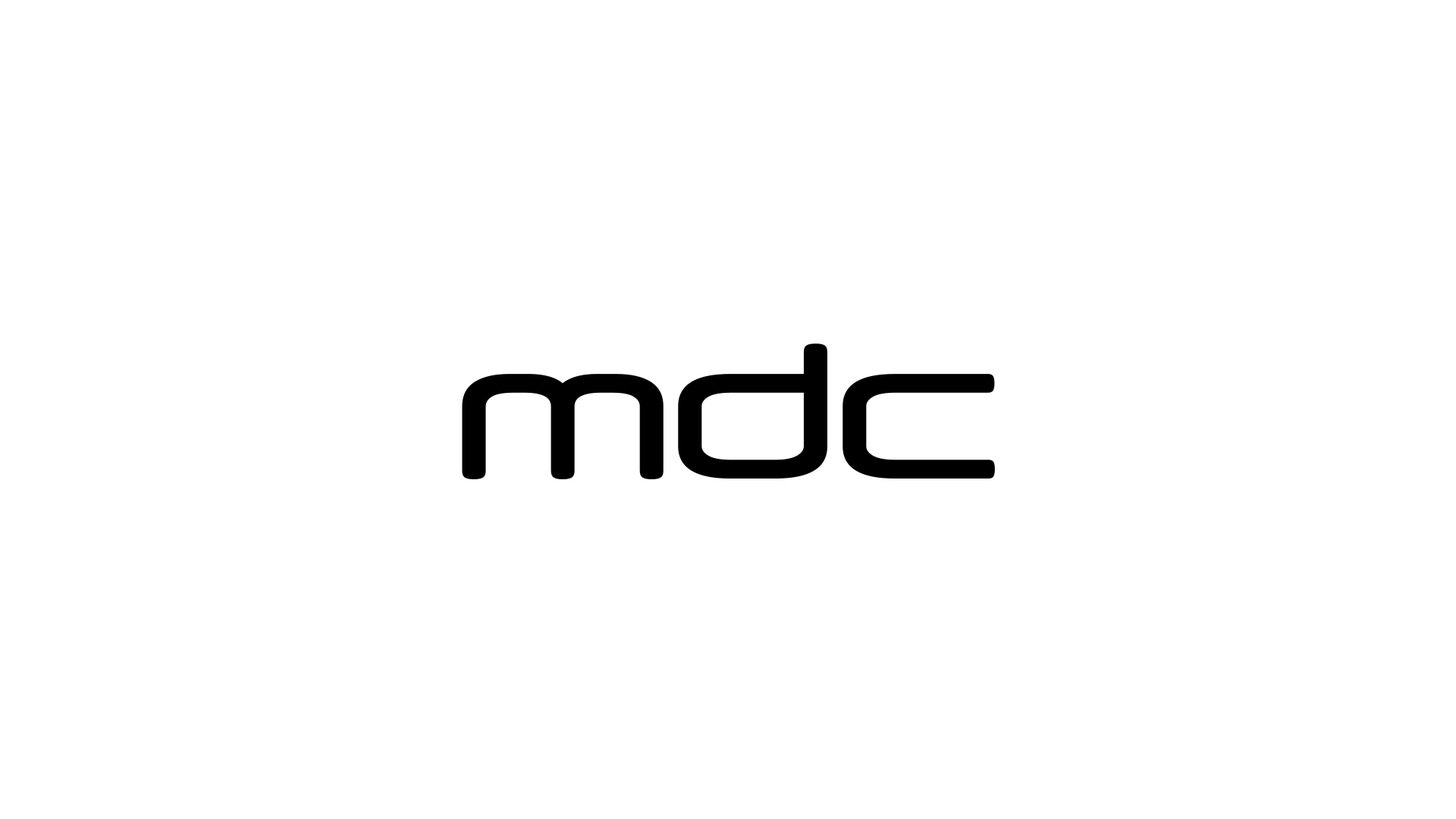
<style>
.page{position:relative;width:1456px;height:819px;background:#ffffff}
.page>*{position:absolute;margin:0}
.t1{font:184.9px "Neuropol-Regular";color:#000000}
</style>
<div class="page">
<p class="t1" style="left:462px;top:344px;width:533px;height:135px">mdc</p>
</div>
